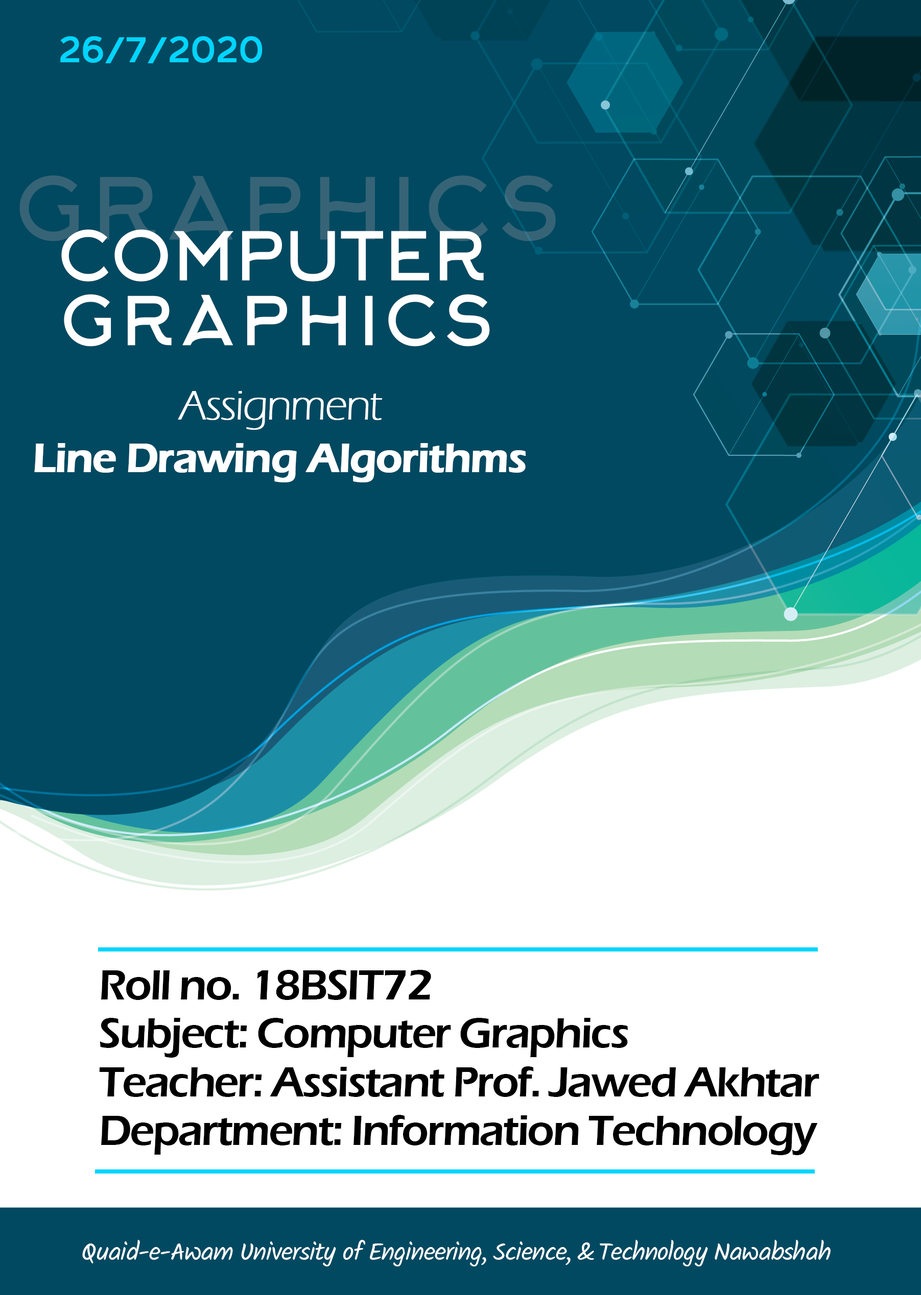
<style>
.page{position:relative;width:921px;height:1295px;background:#004961}
.page>*{position:absolute;margin:0}
.t1{font:33.4px "Arkhip";letter-spacing:-0.04em;color:#00d5ff;font-weight:bold}
.t2{font:83.2px "Arkhip";letter-spacing:0.05em;color:#366476;font-weight:bold}
.t3{font:66px "Arkhip";letter-spacing:-0.04em;color:#ffffff;font-weight:bold}
.t4{font:66px "Arkhip";letter-spacing:0.05em;color:#ffffff;font-weight:bold}
.t5{font:42.5px "ErasITC-Light";letter-spacing:-0.04em;color:#ffffff;font-weight:bold}
.t6{font:42.5px "ErasITC-Demi";letter-spacing:-0.04em;color:#ffffff;font-weight:bold}
.t7{font:43.8px "ErasITC-Demi";letter-spacing:-0.04em;color:#000000}
.t8{font:43.8px "ErasITC-Demi";letter-spacing:-0.04em;color:#010101}
.t9{font:25.8px "Kalam-Regular";letter-spacing:-0.04em;color:#ffffff}
</style>
<div class="page">
<p class="t1" style="left:60px;top:36px;width:202px;height:27px">26/7/2020</p>
<p class="t2" style="left:19px;top:175px;width:537px;height:67px">GRAPHICS</p>
<p class="t3" style="left:61px;top:229px;width:423px;height:53px">COMPUTER</p>
<p class="t4" style="left:64px;top:294px;width:426px;height:53px">GRAPHICS</p>
<p class="t5" style="left:178px;top:391px;width:204px;height:39px">Assignment</p>
<p class="t6" style="left:34px;top:443px;width:492px;height:39px">Line Drawing Algorithms</p>
<p class="t7" style="left:101px;top:970px;width:330px;height:30px">Roll no. 18BSIT72</p>
<p class="t7" style="left:100px;top:1018px;width:528px;height:40px">Subject: Computer Graphics</p>
<p class="t8" style="left:99px;top:1067px;width:720px;height:30px">Teacher: Assistant Prof. Jawed Akhtar</p>
<p class="t7" style="left:101px;top:1115px;width:716px;height:40px">Department: Information Technology</p>
<p class="t9" style="left:82px;top:1240px;width:748px;height:27px">Quaid-e-Awam University of Engineering, Science, &amp; Technology Nawabshah</p>
</div>
